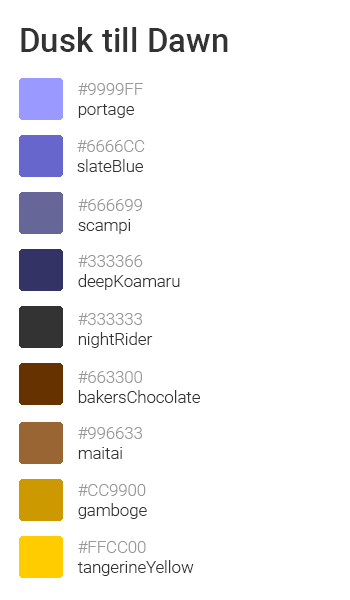
<style>
.page{position:relative;width:350px;height:600px;background:#ffffff}
.page>*{position:absolute;margin:0}
.t1{font:33.3px "Roboto-Medium";color:#333333}
.t2{font:16.7px "Roboto-Light";color:#999999}
.t3{font:16.7px "Roboto-Light";color:#333333}
</style>
<div class="page">
<p class="t1" style="left:21px;top:27px;width:207px;height:25px">Dusk till Dawn</p>
<p class="t2" style="left:78px;top:83px;width:65px;height:35px">#9999FF<br><span class="t3">portage</span></p>
<p class="t3" style="left:77px;top:140px;width:68px;height:32px"><span class="t2">#6666CC<br></span>slateBlue</p>
<p class="t2" style="left:78px;top:199px;width:64px;height:35px">#666699<br><span class="t3">scampi</span></p>
<p class="t3" style="left:78px;top:255px;width:102px;height:35px"><span class="t2">#333366<br></span>deepKoamaru</p>
<p class="t3" style="left:78px;top:313px;width:75px;height:35px"><span class="t2">#333333<br></span>nightRider</p>
<p class="t3" style="left:78px;top:371px;width:122px;height:32px"><span class="t2">#663300<br></span>bakersChocolate</p>
<p class="t2" style="left:78px;top:427px;width:64px;height:32px">#996633<br><span class="t3">maitai</span></p>
<p class="t2" style="left:78px;top:484px;width:69px;height:35px">#CC9900<br><span class="t3">gamboge</span></p>
<p class="t3" style="left:77px;top:541px;width:117px;height:35px"><span class="t2">#FFCC00<br></span>tangerineYellow</p>
</div>
